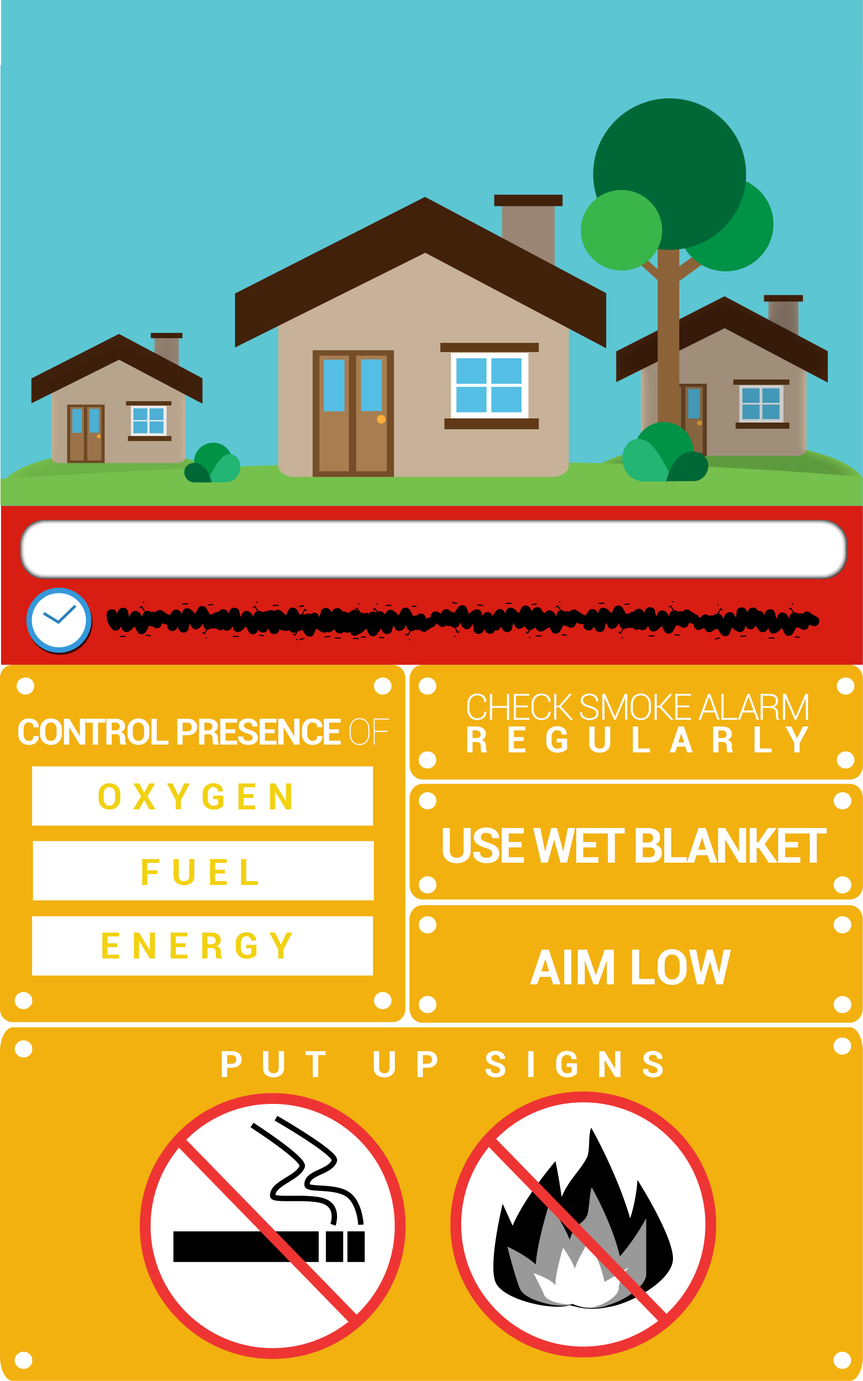
<style>
.page{position:relative;width:863px;height:1381px;background:#f2b10f}
.page>*{position:absolute;margin:0}
.t1{font:36.7px/32.4px "Roboto-Light";letter-spacing:-0.05em;color:#ffffff}
.t2{font:36.7px/32.4px "Roboto-Bold";letter-spacing:0.492em;color:#ffffff}
.t3{font:36.7px "Roboto-Bold";letter-spacing:-0.05em;color:#ffffff}
.t4{font:36.7px "Roboto-Thin";letter-spacing:-0.05em;color:#ffffff}
.t5{font:36.7px "Roboto-Bold";letter-spacing:0.3em;color:#f2d10f}
.t6{font:48.6px "Roboto-Bold";letter-spacing:-0.05em;color:#ffffff}
.t7{font:48.6px "Roboto-Bold";color:#ffffff}
.t8{font:36.7px "Roboto-Bold";letter-spacing:0.5em;color:#ffffff}
</style>
<div class="page">
<p class="t1" style="left:467px;top:693px;width:342px;height:60px">CHECK SMOKE ALARM <br><span class="t2">REGULARLY</span></p>
<p class="t3" style="left:18px;top:718px;width:372px;height:27px">CONTROL PRESENCE <span class="t4">OF</span></p>
<p class="t5" style="left:98px;top:783px;width:194px;height:27px">OXYGEN</p>
<p class="t6" style="left:443px;top:828px;width:384px;height:35px">USE WET BLANKET</p>
<p class="t5" style="left:142px;top:859px;width:116px;height:27px">FUEL</p>
<p class="t5" style="left:102px;top:932px;width:191px;height:27px">ENERGY</p>
<p class="t7" style="left:530px;top:949px;width:201px;height:36px">AIM LOW</p>
<p class="t8" style="left:222px;top:1051px;width:441px;height:27px">PUT UP SIGNS</p>
</div>
